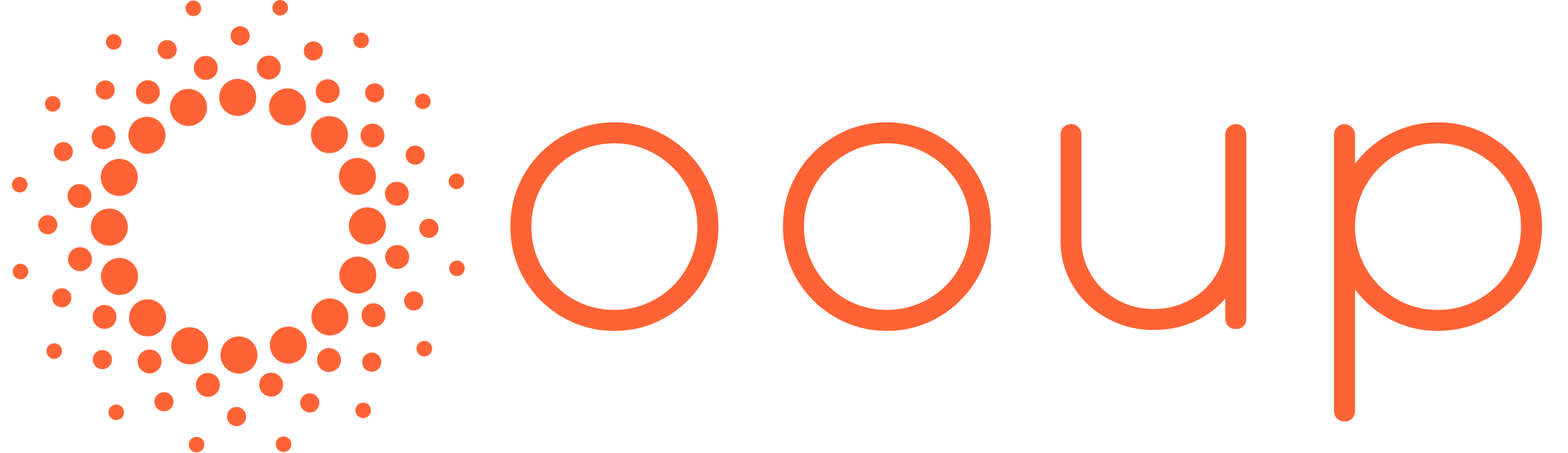
<style>
.page{position:relative;width:1568px;height:453px;background:#ffffff}
.page>*{position:absolute;margin:0}
.t1{font:452.8px "AlioText-Regular";letter-spacing:0.025em;color:#ff6335}
</style>
<div class="page">
<p class="t1" style="left:510px;top:122px;width:1032px;height:300px">ooup</p>
</div>
